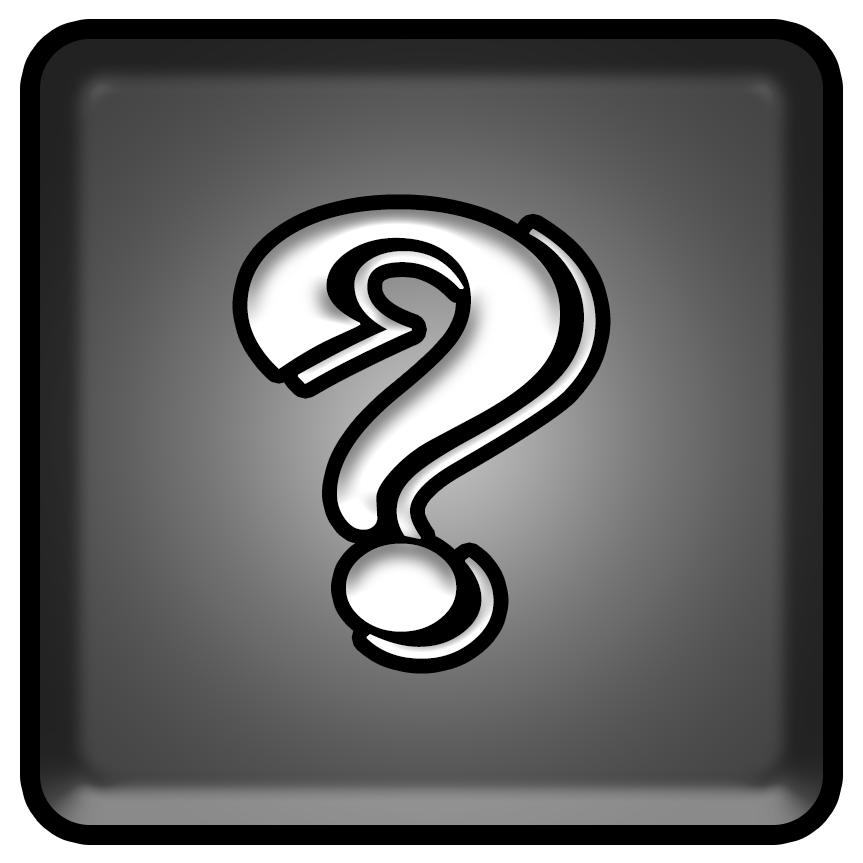
<style>
.page{position:relative;width:863px;height:863px}
.page>*{position:absolute;margin:0}
.t1{font:680.4px "Algerian";color:#ffffff;font-weight:bold;scale:1.26 1}
</style>
<div class="page">
<p class="t1" style="left:247px;top:209px;width:349px;height:450px">?</p>
</div>
